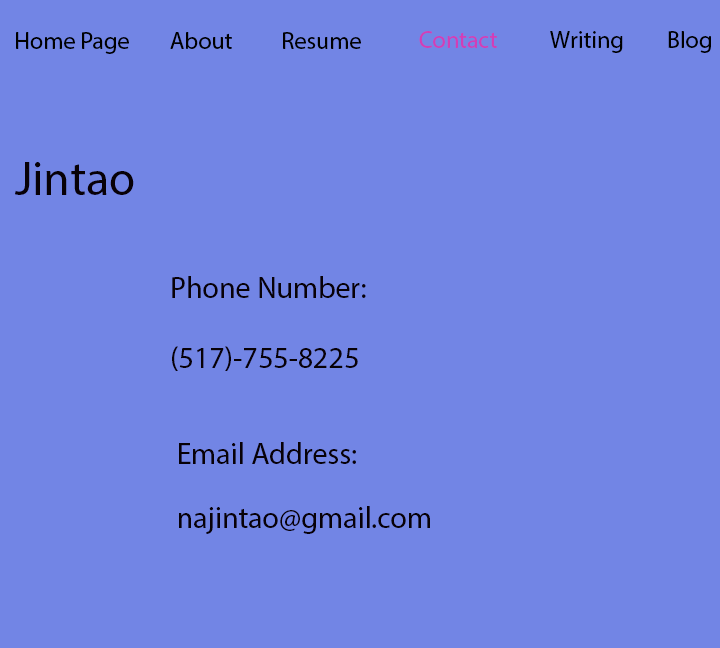
<style>
.page{position:relative;width:720px;height:648px;background:#7285e5}
.page>*{position:absolute;margin:0}
.t1{font:24px "MyriadPro-Regular";color:#000000}
.t2{font:24px "MyriadPro-Regular";color:#d13eb7}
.t3{font:48px "MyriadPro-Regular";color:#080107}
.t4{font:30px "MyriadPro-Regular";color:#080107}
</style>
<div class="page">
<p class="t1" style="left:16px;top:32px;width:113px;height:22px">Home Page</p>
<p class="t1" style="left:170px;top:32px;width:62px;height:17px">About</p>
<p class="t1" style="left:283px;top:32px;width:78px;height:17px">Resume</p>
<p class="t2" style="left:419px;top:31px;width:78px;height:17px">Contact</p>
<p class="t1" style="left:550px;top:31px;width:73px;height:22px">Writing</p>
<p class="t1" style="left:668px;top:31px;width:43px;height:22px">Blog</p>
<p class="t3" style="left:15px;top:162px;width:119px;height:33px">Jintao</p>
<p class="t4" style="left:172px;top:276px;width:194px;height:22px">Phone Number:</p>
<p class="t4" style="left:172px;top:346px;width:186px;height:25px">(517)-755-8225</p>
<p class="t4" style="left:179px;top:442px;width:177px;height:22px">Email Address:</p>
<p class="t4" style="left:179px;top:506px;width:251px;height:28px">najintao@gmail.com</p>
</div>
